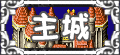
<style>
.page{position:relative;width:120px;height:55px}
.page>*{position:absolute;margin:0}
.t1{font:30px "MYoungHKS-Xbold";color:#ffffff}
</style>
<div class="page">
<p class="t1" style="left:32px;top:13px;width:57px;height:27px">主城</p>
</div>
